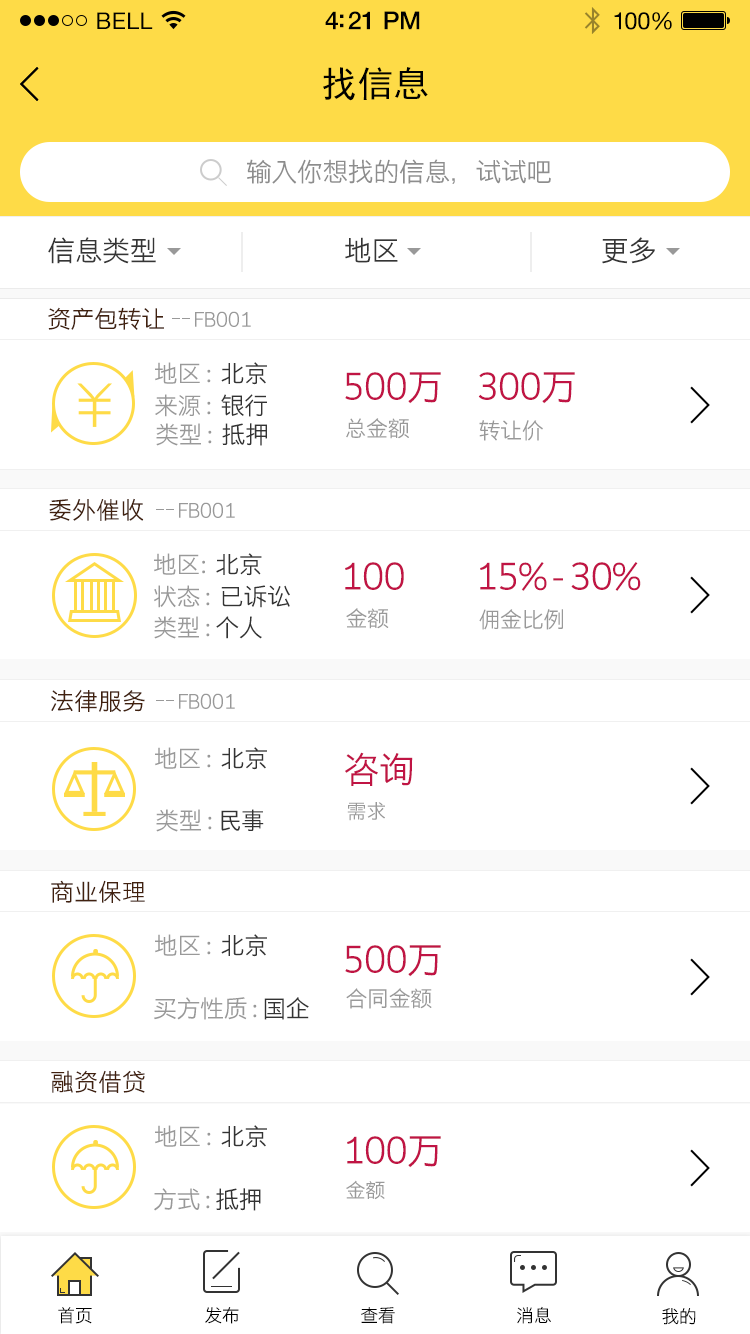
<style>
.page{position:relative;width:750px;height:1334px;background:#ffffff}
.page>*{position:absolute;margin:0}
.t1{font:23px "HelveticaNeue";letter-spacing:0.02em;color:#000000}
.t2{font:25px "HelveticaNeue-Medium";letter-spacing:-0.02em;color:#000000}
.t3{font:24px "HelveticaNeue";letter-spacing:-0.02em;color:#010101}
.t4{font:36px "SimHei";color:#000000}
.t5{font:26px "STHeitiSC-Light";letter-spacing:-0.02em;color:#8d8d8d}
.t6{font:28px "STHeitiSC-Light";letter-spacing:-0.02em;color:#353535}
.t7{font:24px "STHeitiSC-Light";letter-spacing:-0.02em;color:#41210f}
.t8{font:20px "STHeitiSC-Light";letter-spacing:-0.02em;color:#999999}
.t9{font:24px "STHeitiSC-Light";letter-spacing:-0.02em;color:#999999}
.t10{font:24px "STHeitiSC-Light";letter-spacing:-0.02em;color:#333333}
.t11{font:36px "STHeitiSC-Light";letter-spacing:-0.02em;color:#c01444}
.t12{font:22px "STHeitiSC-Light";letter-spacing:-0.02em;color:#999999}
.t13{font:24px "STHeitiSC-Light";color:#41210f}
.t14{font:18px "STHeitiSC-Light";letter-spacing:-0.02em;color:#000000}
</style>
<div class="page">
<p class="t1" style="left:97px;top:12px;width:56px;height:17px">BELL</p>
<p class="t1" style="left:97px;top:12px;width:56px;height:17px">BELL</p>
<p class="t2" style="left:325px;top:11px;width:95px;height:19px">4:21 PM</p>
<p class="t2" style="left:325px;top:11px;width:95px;height:19px">4:21 PM</p>
<p class="t3" style="left:614px;top:12px;width:58px;height:18px">100%</p>
<p class="t3" style="left:614px;top:12px;width:58px;height:18px">100%</p>
<p class="t4" style="left:323px;top:67px;width:105px;height:34px">找信息</p>
<p class="t5" style="left:247px;top:159px;width:304px;height:25px">输入你想找的信息，试试吧</p>
<p class="t6" style="left:48px;top:237px;width:108px;height:27px">信息类型</p>
<p class="t6" style="left:345px;top:237px;width:53px;height:26px">地区</p>
<p class="t6" style="left:602px;top:237px;width:53px;height:27px">更多</p>
<p class="t7" style="left:48px;top:307px;width:116px;height:23px">资产包转让</p>
<p class="t8" style="left:195px;top:311px;width:56px;height:16px">FB001</p>
<p class="t9" style="left:155px;top:362px;width:112px;height:23px">地区 :  <span class="t10">北京</span></p>
<p class="t11" style="left:345px;top:372px;width:96px;height:32px">500万</p>
<p class="t11" style="left:478px;top:372px;width:97px;height:32px">300万</p>
<p class="t9" style="left:155px;top:394px;width:112px;height:23px">来源 :  <span class="t10">银行</span></p>
<p class="t9" style="left:156px;top:423px;width:111px;height:23px">类型 :  <span class="t10">抵押</span></p>
<p class="t12" style="left:346px;top:418px;width:63px;height:21px">总金额</p>
<p class="t12" style="left:479px;top:420px;width:64px;height:21px">转让价</p>
<p class="t13" style="left:49px;top:498px;width:95px;height:23px">委外催收</p>
<p class="t8" style="left:179px;top:502px;width:56px;height:16px">FB001</p>
<p class="t9" style="left:154px;top:553px;width:108px;height:23px">地区:  <span class="t10">北京</span></p>
<p class="t11" style="left:345px;top:562px;width:59px;height:28px">100</p>
<p class="t11" style="left:480px;top:562px;width:161px;height:29px">15% - 30%</p>
<p class="t9" style="left:154px;top:585px;width:136px;height:23px">状态 :  <span class="t10">已诉讼</span></p>
<p class="t9" style="left:154px;top:616px;width:108px;height:23px">类型 : <span class="t10">个人</span></p>
<p class="t12" style="left:346px;top:608px;width:43px;height:21px">金额</p>
<p class="t12" style="left:479px;top:609px;width:84px;height:21px">佣金比例</p>
<p class="t13" style="left:51px;top:689px;width:94px;height:23px">法律服务</p>
<p class="t8" style="left:179px;top:693px;width:56px;height:16px">FB001</p>
<p class="t9" style="left:155px;top:747px;width:112px;height:23px">地区 :  <span class="t10">北京</span></p>
<p class="t11" style="left:345px;top:752px;width:68px;height:34px">咨询</p>
<p class="t9" style="left:156px;top:809px;width:108px;height:23px">类型 : <span class="t10">民事</span></p>
<p class="t8" style="left:347px;top:802px;width:38px;height:19px">需求</p>
<p class="t13" style="left:51px;top:880px;width:94px;height:23px">商业保理</p>
<p class="t9" style="left:155px;top:934px;width:112px;height:23px">地区 :  <span class="t10">北京</span></p>
<p class="t11" style="left:345px;top:945px;width:96px;height:32px">500万</p>
<p class="t12" style="left:346px;top:988px;width:86px;height:21px">合同金额</p>
<p class="t9" style="left:154px;top:997px;width:155px;height:23px">买方性质 : <span class="t10">国企</span></p>
<p class="t13" style="left:51px;top:1070px;width:94px;height:23px">融资借贷</p>
<p class="t9" style="left:155px;top:1125px;width:112px;height:23px">地区 :  <span class="t10">北京</span></p>
<p class="t11" style="left:347px;top:1136px;width:94px;height:32px">100万</p>
<p class="t8" style="left:346px;top:1180px;width:39px;height:20px">金额</p>
<p class="t9" style="left:154px;top:1188px;width:107px;height:23px">方式 : <span class="t10">抵押</span></p>
<p class="t14" style="left:58px;top:1307px;width:34px;height:17px">首页</p>
<p class="t14" style="left:205px;top:1307px;width:34px;height:17px">发布</p>
<p class="t14" style="left:361px;top:1307px;width:34px;height:17px">查看</p>
<p class="t14" style="left:517px;top:1306px;width:34px;height:18px">消息</p>
<p class="t14" style="left:662px;top:1308px;width:34px;height:17px">我的</p>
</div>
